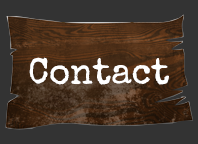
<style>
.page{position:relative;width:198px;height:144px;background:#333333}
.page>*{position:absolute;margin:0}
.t1{font:36px "SpecialElite-Regular";color:#ffffff}
</style>
<div class="page">
<p class="t1" style="left:29px;top:57px;width:140px;height:28px">Contact</p>
</div>
